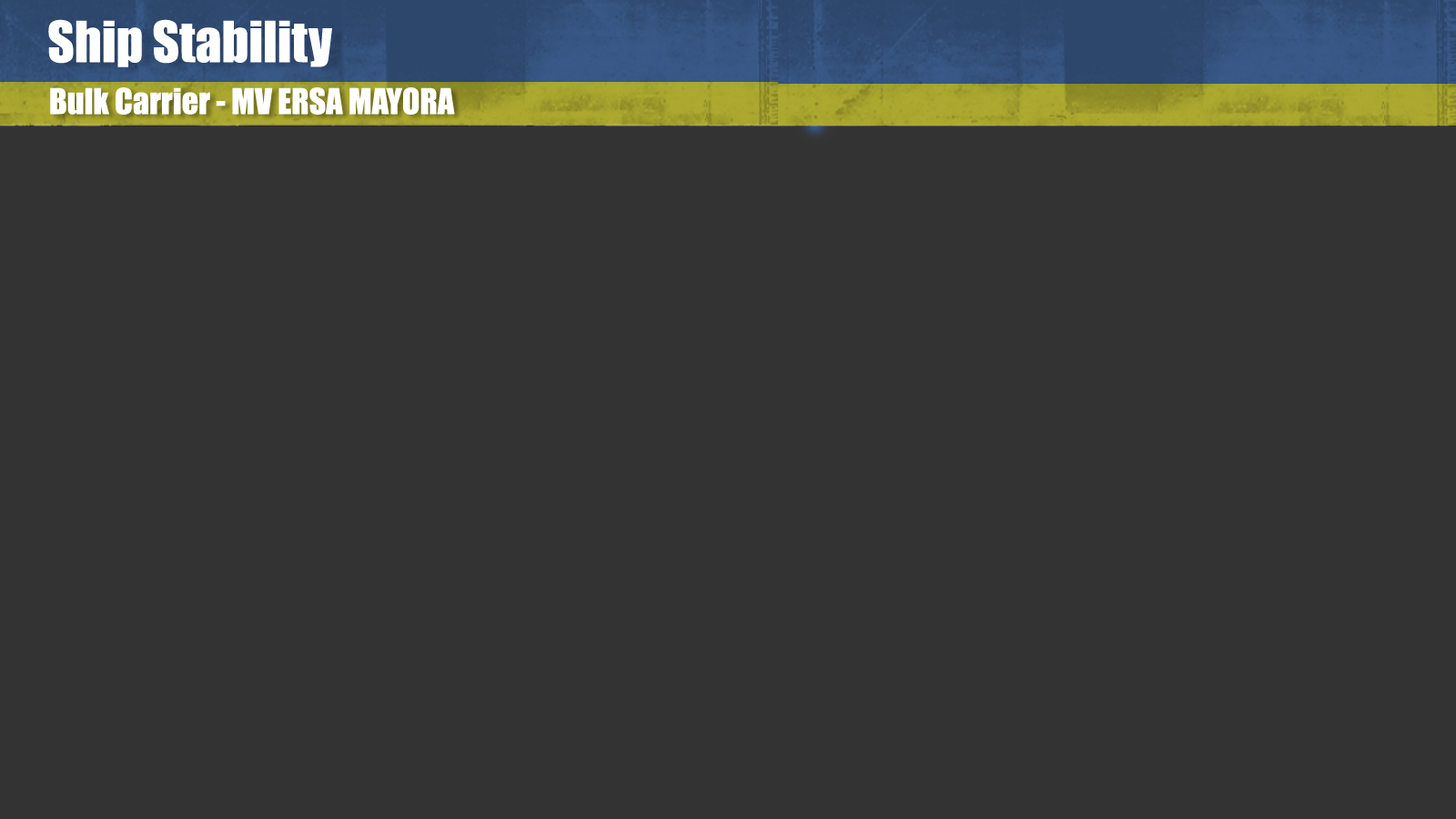
<style>
.page{position:relative;width:1456px;height:819px;background:#333333}
.page>*{position:absolute;margin:0}
.t1{font:52.2px "Impact";color:#ffffff}
.t2{font:32.8px "Impact";color:#ffffff}
</style>
<div class="page">
<p class="t1" style="left:48px;top:19px;width:284px;height:48px">Ship Stability</p>
<p class="t2" style="left:50px;top:87px;width:405px;height:28px">Bulk Carrier - MV ERSA MAYORA</p>
</div>
